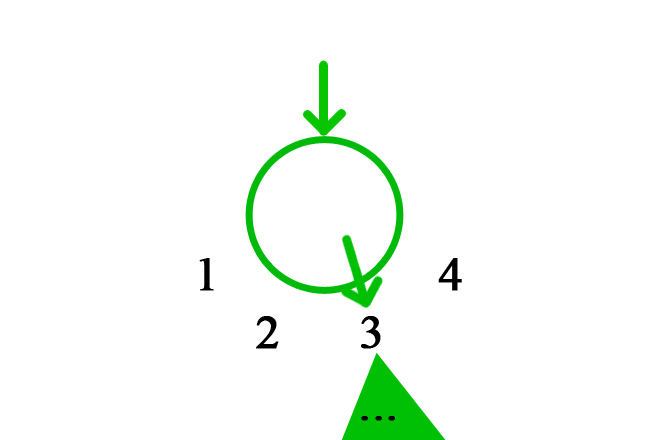
<style>
.page{position:relative;width:660px;height:440px;background:#ffffff}
.page>*{position:absolute;margin:0}
.t1{font:48px "TimesNewRomanPSMT";color:#000000;font-weight:bold}
</style>
<div class="page">
<p class="t1" style="left:199px;top:258px;width:15px;height:33px">1</p>
<p class="t1" style="left:438px;top:258px;width:24px;height:33px">4</p>
<p class="t1" style="left:256px;top:316px;width:23px;height:33px">2</p>
<p class="t1" style="left:361px;top:316px;width:20px;height:33px">3</p>
<p class="t1" style="left:361px;top:416px;width:34px;height:5px">...</p>
</div>
